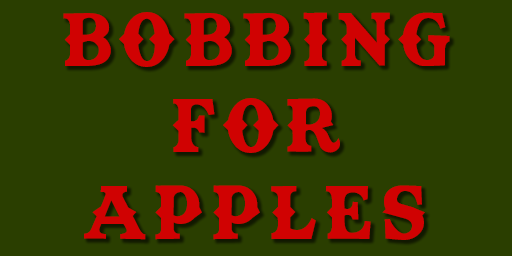
<style>
.page{position:relative;width:512px;height:256px;background:#2a3e00}
.page>*{position:absolute;margin:0}
.t1{font:72px "TexasTangoBOLDPERSONALUSE";letter-spacing:0.1em;color:#d00202}
</style>
<div class="page">
<p class="t1" style="left:63px;top:12px;width:387px;height:228px;text-align:center">BOBBING<br>FOR<br>APPLES</p>
</div>
